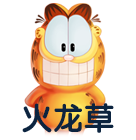
<style>
.page{position:relative;width:136px;height:140px;background:#ffffff}
.page>*{position:absolute;margin:0}
.t1{font:31.3px "FZY4JW--GB1-0";color:#0c243f}
</style>
<div class="page">
<p class="t1" style="left:22px;top:103px;width:92px;height:30px">火龙草</p>
</div>
